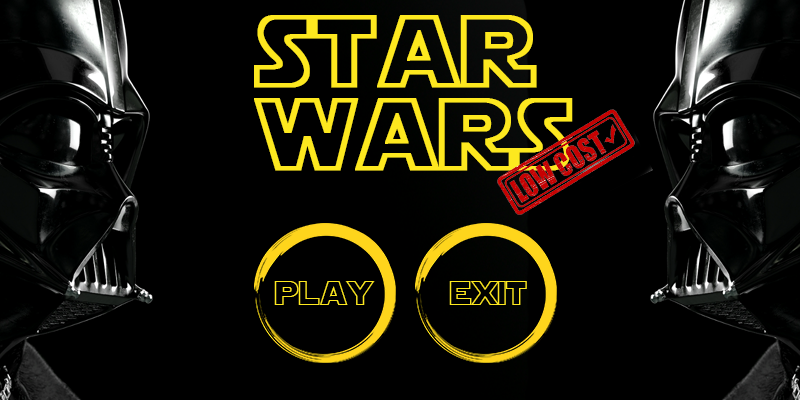
<style>
.page{position:relative;width:800px;height:400px;background:#000000}
.page>*{position:absolute;margin:0}
.t1{font:100px "StarJediHollow";color:#fde81f;font-weight:bold}
.t2{font:33.3px "StarJediHollow";color:#fde81f}
</style>
<div class="page">
<p class="t1" style="left:254px;top:15px;width:319px;height:156px">star wars</p>
<p class="t2" style="left:274px;top:281px;width:101px;height:24px">play</p>
<p class="t2" style="left:449px;top:281px;width:78px;height:24px">exit</p>
</div>
